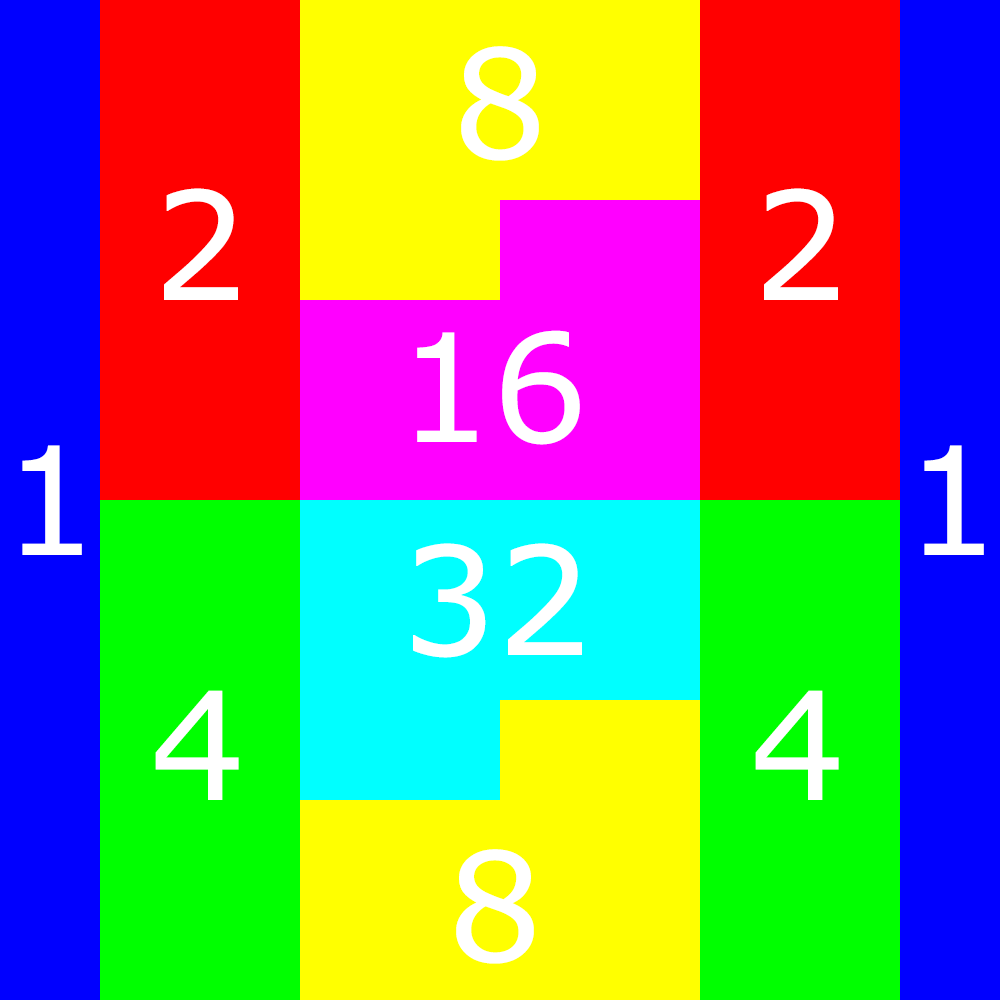
<style>
.page{position:relative;width:1000px;height:1000px}
.page>*{position:absolute;margin:0}
.t1{font:150px "MSReferenceSansSerif";color:#ffffff}
</style>
<div class="page">
<p class="t1" style="left:461px;top:46px;width:78px;height:115px;text-align:center">8<br><br>V</p>
<p class="t1" style="left:164px;top:188px;width:74px;height:112px">2</p>
<p class="t1" style="left:764px;top:188px;width:74px;height:112px">2</p>
<p class="t1" style="left:417px;top:330px;width:163px;height:115px;text-align:center">16<br><br>V</p>
<p class="t1" style="left:22px;top:445px;width:60px;height:110px">1</p>
<p class="t1" style="left:924px;top:445px;width:60px;height:110px">1</p>
<p class="t1" style="left:413px;top:543px;width:169px;height:115px;text-align:center">32<br><br>V</p>
<p class="t1" style="left:155px;top:690px;width:84px;height:110px;text-align:center">4<br>V</p>
<p class="t1" style="left:755px;top:690px;width:84px;height:110px;text-align:center">4<br>V</p>
<p class="t1" style="left:456px;top:849px;width:78px;height:115px;text-align:center">8<br><br>V</p>
</div>
